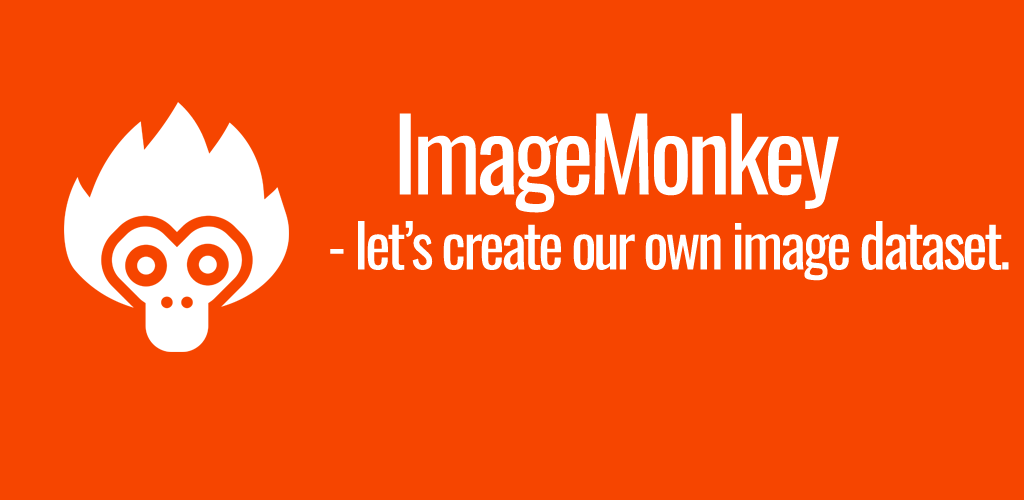
<style>
.page{position:relative;width:1024px;height:500px;background:#f64500}
.page>*{position:absolute;margin:0}
.t1{font:100px "Oswald-Regular";letter-spacing:-0.05em;color:#ffffff}
.t2{font:60px "Oswald-Regular";letter-spacing:-0.05em;color:#ffffff}
</style>
<div class="page">
<p class="t1" style="left:399px;top:113px;width:440px;height:100px">ImageMonkey</p>
<p class="t2" style="left:330px;top:221px;width:679px;height:60px">- let’s create our own image dataset.</p>
</div>
